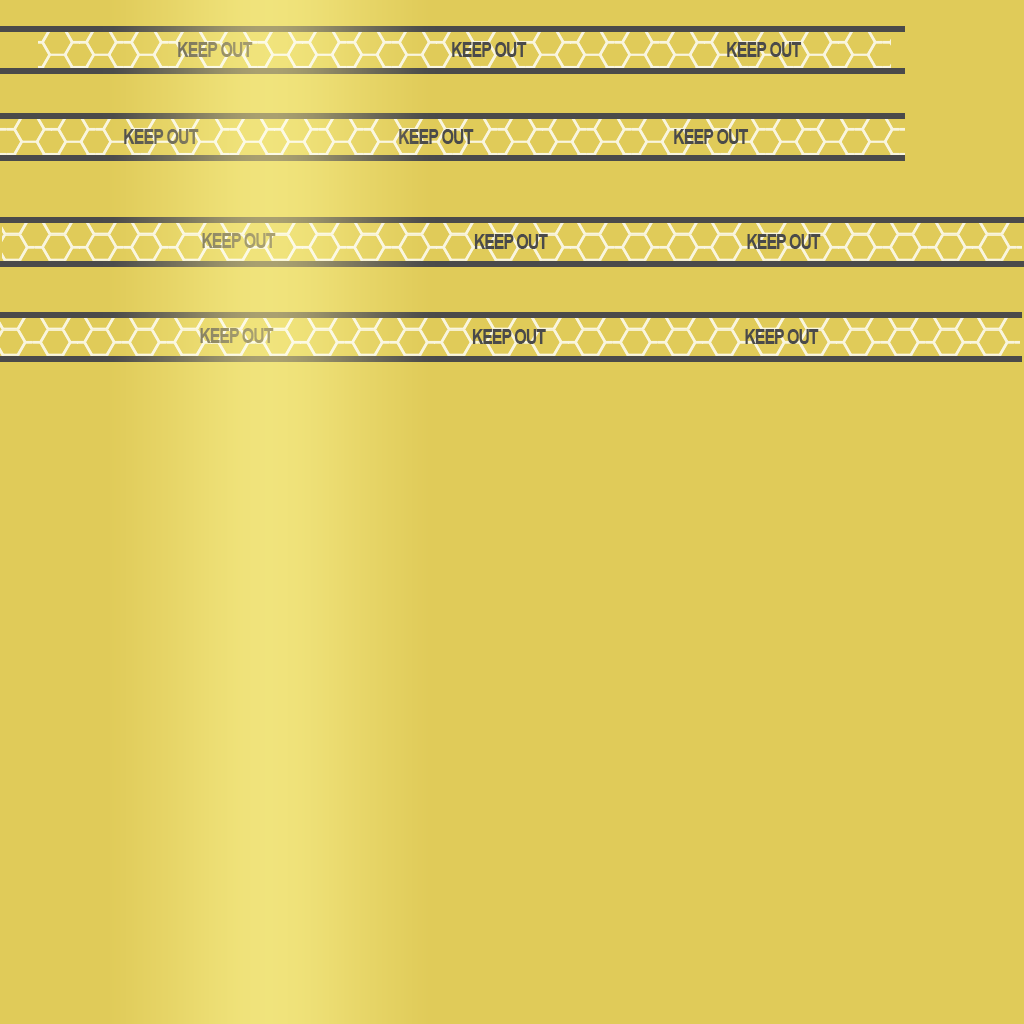
<style>
.page{position:relative;width:1024px;height:1024px;background:#e0cb59}
.page>*{position:absolute;margin:0}
.t1{font:20px "Arial-BoldMT";letter-spacing:-0.05em;color:#8b8564;scale:0.79 1}
.t2{font:20px "Arial-BoldMT";letter-spacing:-0.05em;color:#4a4a4a;scale:0.79 1}
.t3{font:20px "Arial-BoldMT";letter-spacing:-0.05em;color:#656255;scale:0.79 1}
.t4{font:20px "Arial-BoldMT";letter-spacing:-0.05em;color:#9b936a;scale:0.78 1}
.t5{font:20px "Arial-BoldMT";letter-spacing:-0.05em;color:#4a4a4a;scale:0.78 1}
.t6{font:20px "Arial-BoldMT";letter-spacing:-0.05em;color:#9a926a;scale:0.78 1}
</style>
<div class="page">
<p class="t1" style="left:178px;top:42px;width:75px;height:15px">KEEP OUT</p>
<p class="t2" style="left:452px;top:42px;width:75px;height:15px">KEEP OUT</p>
<p class="t2" style="left:727px;top:42px;width:75px;height:15px">KEEP OUT</p>
<p class="t3" style="left:124px;top:129px;width:75px;height:15px">KEEP OUT</p>
<p class="t2" style="left:399px;top:129px;width:75px;height:15px">KEEP OUT</p>
<p class="t2" style="left:674px;top:129px;width:75px;height:15px">KEEP OUT</p>
<p class="t4" style="left:202px;top:233px;width:74px;height:15px">KEEP OUT</p>
<p class="t5" style="left:474px;top:234px;width:74px;height:15px">KEEP OUT</p>
<p class="t5" style="left:747px;top:234px;width:74px;height:15px">KEEP OUT</p>
<p class="t6" style="left:200px;top:328px;width:74px;height:15px">KEEP OUT</p>
<p class="t5" style="left:472px;top:329px;width:74px;height:15px">KEEP OUT</p>
<p class="t5" style="left:745px;top:329px;width:74px;height:15px">KEEP OUT</p>
</div>
